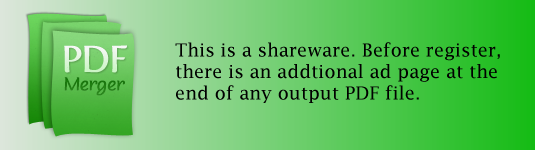
<style>
.page{position:relative;width:535px;height:150px}
.page>*{position:absolute;margin:0}
.t1{font:37.5px "FertigoPro-Regular";letter-spacing:-0.05em;color:#e5f6e2}
.t2{font:18px "LucidaFax";color:#000000}
.t3{font:18px "SovbaRegular";color:#1d7c10;font-weight:bold}
</style>
<div class="page">
<p class="t1" style="left:64px;top:45px;width:63px;height:28px">PDF</p>
<p class="t2" style="left:175px;top:42px;width:325px;height:61px">This is a shareware. Before register, there is an addtional ad page at the end of any output PDF file.</p>
<p class="t3" style="left:64px;top:77px;width:61px;height:19px">Merger</p>
</div>
